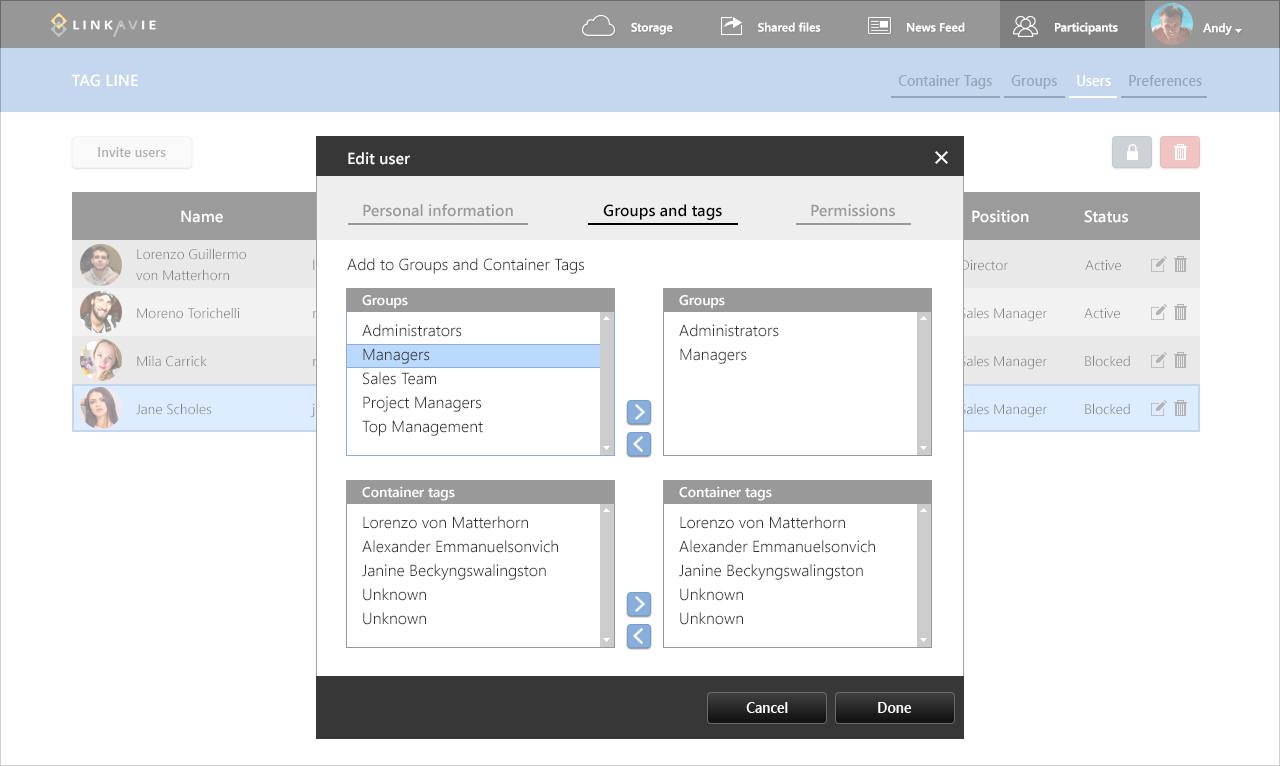
<style>
.page{position:relative;width:1280px;height:766px;background:#ffffff}
.page>*{position:absolute;margin:0}
.t1{font:12px "WeblySleekUISemibold";color:#ffffff}
.t2{font:16px "WeblySleekUISemibold";color:#ffffff;text-transform:uppercase}
.t3{font:14.7px "WeblySleekUISemibold";color:#95a6b9;scale:0.95 1}
.t4{font:14.7px "WeblySleekUISemibold";color:#ffffff;scale:0.95 1}
.t5{font:14px "WeblySleekUISemibold";color:#aeaeae;scale:0.95 1}
.t6{font:16px "WeblySleekUISemibold";color:#ffffff}
.t7{font:16px "WeblySleekUISemibold";color:#999999}
.t8{font:16px "WeblySleekUISemibold";color:#000000}
.t9{font:14px/21px "WeblySleekUISemilight";color:#808080}
.t10{font:16px "WeblySleekUISemilight";color:#333333}
.t11{font:14px "WeblySleekUISemilight";color:#808080}
.t12{font:14px "WeblySleekUISemibold";color:#ffffff}
.t13{font:16px/24px "WeblySleekUISemilight";color:#333333}
</style>
<div class="page">
<p class="t1" style="left:631px;top:22px;width:42px;height:13px">Storage</p>
<p class="t1" style="left:758px;top:22px;width:63px;height:10px">Shared files</p>
<p class="t1" style="left:907px;top:22px;width:58px;height:10px">News Feed</p>
<p class="t1" style="left:1055px;top:22px;width:63px;height:13px">Participants</p>
<p class="t1" style="left:1203px;top:23px;width:29px;height:12px">Andy</p>
<p class="t2" style="left:71px;top:74px;width:67px;height:13px">Tag line</p>
<p class="t3" style="left:898px;top:75px;width:94px;height:14px">Container Tags</p>
<p class="t3" style="left:1011px;top:75px;width:46px;height:14px">Groups</p>
<p class="t4" style="left:1077px;top:75px;width:34px;height:11px">Users</p>
<p class="t3" style="left:1129px;top:75px;width:73px;height:11px">Preferences</p>
<p class="t5" style="left:98px;top:147px;width:68px;height:10px">Invite users</p>
<p class="t6" style="left:348px;top:152px;width:62px;height:13px">Edit user</p>
<p class="t7" style="left:363px;top:204px;width:150px;height:13px">Personal information</p>
<p class="t8" style="left:603px;top:204px;width:119px;height:16px">Groups and tags</p>
<p class="t7" style="left:811px;top:204px;width:84px;height:13px">Permissions</p>
<p class="t6" style="left:181px;top:210px;width:42px;height:13px">Name</p>
<p class="t6" style="left:972px;top:210px;width:57px;height:13px">Position</p>
<p class="t6" style="left:1084px;top:210px;width:44px;height:13px">Status</p>
<p class="t9" style="left:136px;top:248px;width:110px;height:33px">Lorenzo Guillermo <br>von Matterhorn</p>
<p class="t10" style="left:347px;top:258px;width:237px;height:16px">Add to Groups and Container Tags</p>
<p class="t11" style="left:961px;top:260px;width:47px;height:11px">Director</p>
<p class="t11" style="left:1085px;top:260px;width:36px;height:11px">Active</p>
<p class="t12" style="left:362px;top:295px;width:46px;height:14px">Groups</p>
<p class="t12" style="left:679px;top:295px;width:46px;height:14px">Groups</p>
<p class="t11" style="left:137px;top:307px;width:103px;height:12px">Moreno Torichelli</p>
<p class="t11" style="left:960px;top:307px;width:87px;height:15px">Sales Manager</p>
<p class="t11" style="left:1084px;top:308px;width:36px;height:11px">Active</p>
<p class="t13" style="left:362px;top:324px;width:121px;height:112px">Administrators<br>Managers<br>Sales Team<br>Project Managers<br>Top Management</p>
<p class="t13" style="left:679px;top:324px;width:100px;height:40px">Administrators<br>Managers</p>
<p class="t11" style="left:137px;top:355px;width:70px;height:12px">Mila Carrick</p>
<p class="t11" style="left:960px;top:355px;width:87px;height:15px">Sales Manager</p>
<p class="t11" style="left:1085px;top:355px;width:45px;height:12px">Blocked</p>
<p class="t11" style="left:136px;top:403px;width:76px;height:12px">Jane Scholes</p>
<p class="t11" style="left:960px;top:403px;width:87px;height:15px">Sales Manager</p>
<p class="t11" style="left:1085px;top:403px;width:45px;height:12px">Blocked</p>
<p class="t12" style="left:362px;top:486px;width:93px;height:15px">Container tags</p>
<p class="t12" style="left:679px;top:486px;width:93px;height:15px">Container tags</p>
<p class="t13" style="left:362px;top:516px;width:196px;height:109px">Lorenzo von Matterhorn<br>Alexander Emmanuelsonvich<br>Janine Beckyngswalingston<br>Unknown<br>Unknown</p>
<p class="t13" style="left:679px;top:516px;width:196px;height:109px">Lorenzo von Matterhorn<br>Alexander Emmanuelsonvich<br>Janine Beckyngswalingston<br>Unknown<br>Unknown</p>
<p class="t4" style="left:746px;top:702px;width:42px;height:11px">Cancel</p>
<p class="t4" style="left:878px;top:702px;width:34px;height:11px">Done</p>
</div>
